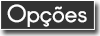
<style>
.page{position:relative;width:100px;height:36px;background:#333333}
.page>*{position:absolute;margin:0}
.t1{font:24px "Arcon-Regular";color:#ffffff}
</style>
<div class="page">
<p class="t1" style="left:7px;top:4px;width:80px;height:23px">Opções</p>
</div>
